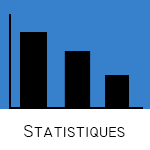
<style>
.page{position:relative;width:150px;height:150px;background:#3780cb}
.page>*{position:absolute;margin:0}
.t1{font:18px "Technic";color:#000000}
</style>
<div class="page">
<p class="t1" style="left:24px;top:125px;width:101px;height:12px">Statistiques</p>
</div>
